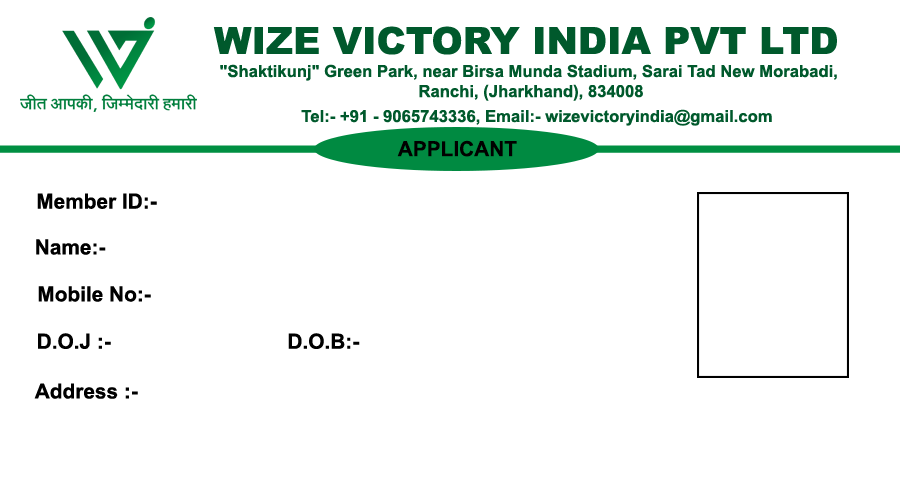
<style>
.page{position:relative;width:900px;height:481px;background:#ffffff}
.page>*{position:absolute;margin:0}
.t1{font:37.5px "Arial-Black";color:#00592c}
.t2{font:16.7px "Arial-BoldMT";color:#00592c}
.t3{font:20.8px "Arial-BoldMT";color:#000000}
</style>
<div class="page">
<p class="t1" style="left:213px;top:26px;width:624px;height:29px">WIZE VICTORY INDIA PVT LTD</p>
<p class="t2" style="left:220px;top:64px;width:617px;height:37px;text-align:center">"Shaktikunj" Green Park, near Birsa Munda Stadium, Sarai Tad New Morabadi, <br>Ranchi, (Jharkhand), 834008</p>
<p class="t2" style="left:301px;top:109px;width:471px;height:17px">Tel:- +91 - 9065743336, Email:- wizevictoryindia@gmail.com</p>
<p class="t3" style="left:397px;top:140px;width:120px;height:17px">APPLICANT</p>
<p class="t3" style="left:37px;top:193px;width:120px;height:16px">Member ID:-</p>
<p class="t3" style="left:36px;top:239px;width:70px;height:16px">Name:-</p>
<p class="t3" style="left:38px;top:286px;width:113px;height:16px">Mobile No:-</p>
<p class="t3" style="left:38px;top:333px;width:322px;height:16px">D.O.J :-            D.O.B:-</p>
<p class="t3" style="left:34px;top:383px;width:104px;height:16px">Address :-</p>
</div>
